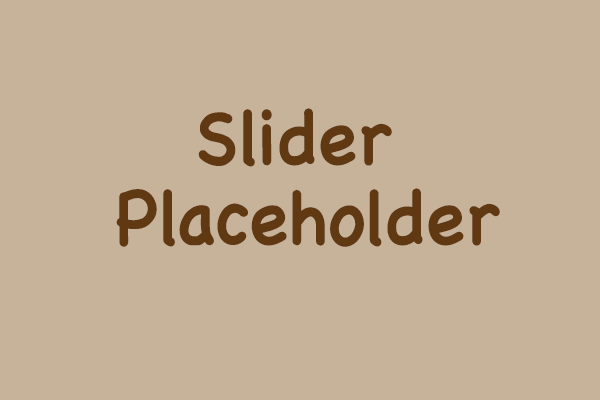
<style>
.page{position:relative;width:600px;height:400px;background:#c7b29a}
.page>*{position:absolute;margin:0}
.t1{font:75.6px/80px "Chalkboard";letter-spacing:-0.01em;color:#603913;font-weight:bold;scale:0.95 1}
</style>
<div class="page">
<p class="t1" style="left:116px;top:108px;width:384px;height:139px;text-align:center">Slider <br>Placeholder</p>
</div>
